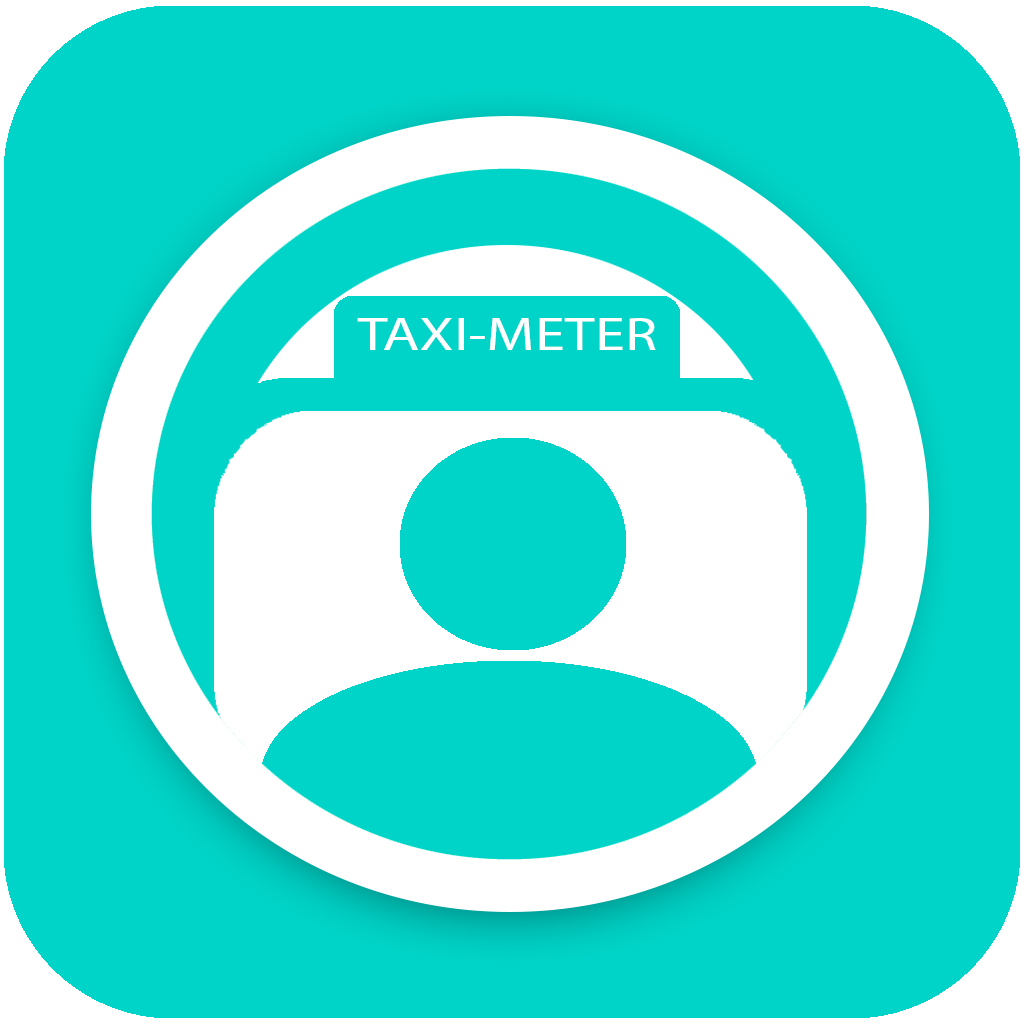
<style>
.page{position:relative;width:1024px;height:1024px;background:#00d4c8}
.page>*{position:absolute;margin:0}
.t1{font:46px "MyriadPro-Regular";color:#ffffff;scale:1.31 1}
</style>
<div class="page">
<p class="t1" style="left:357px;top:318px;width:299px;height:32px">TAXI-METER</p>
</div>
